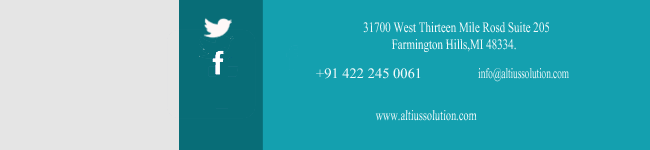
<style>
.page{position:relative;width:650px;height:150px;background:#14a0af}
.page>*{position:absolute;margin:0}
.t1{font:18px/21px "Aparajita";color:#f2fafb;scale:0.76 1}
.t2{font:18px/21px "Aparajita";color:#14a0af;scale:0.76 1}
.t3{font:18px "Aparajita";color:#f2fafb}
.t4{font:12px "Aparajita";color:#f2fafb}
.t5{font:18px "Aparajita";scale:0.63 1}
.t6{font:18px "Aparajita";color:#f2fafb;scale:0.71 1}
</style>
<div class="page">
<p class="t1" style="left:358px;top:22px;width:191px;height:31px;text-align:center"><span class="t2">3</span>31700 West Thirteen Mile Rosd Suite 205 <br>Farmington Hills,MI 48334.</p>
<p class="t3" style="left:316px;top:68px;width:105px;height:11px"><span class="t4">                         </span> +91 422 245 0061</p>
<p class="t5" style="left:478px;top:68px;width:91px;height:14px">info@altiussolution.com</p>
<p class="t6" style="left:375px;top:110px;width:102px;height:11px">www.altiussolution.com</p>
</div>
